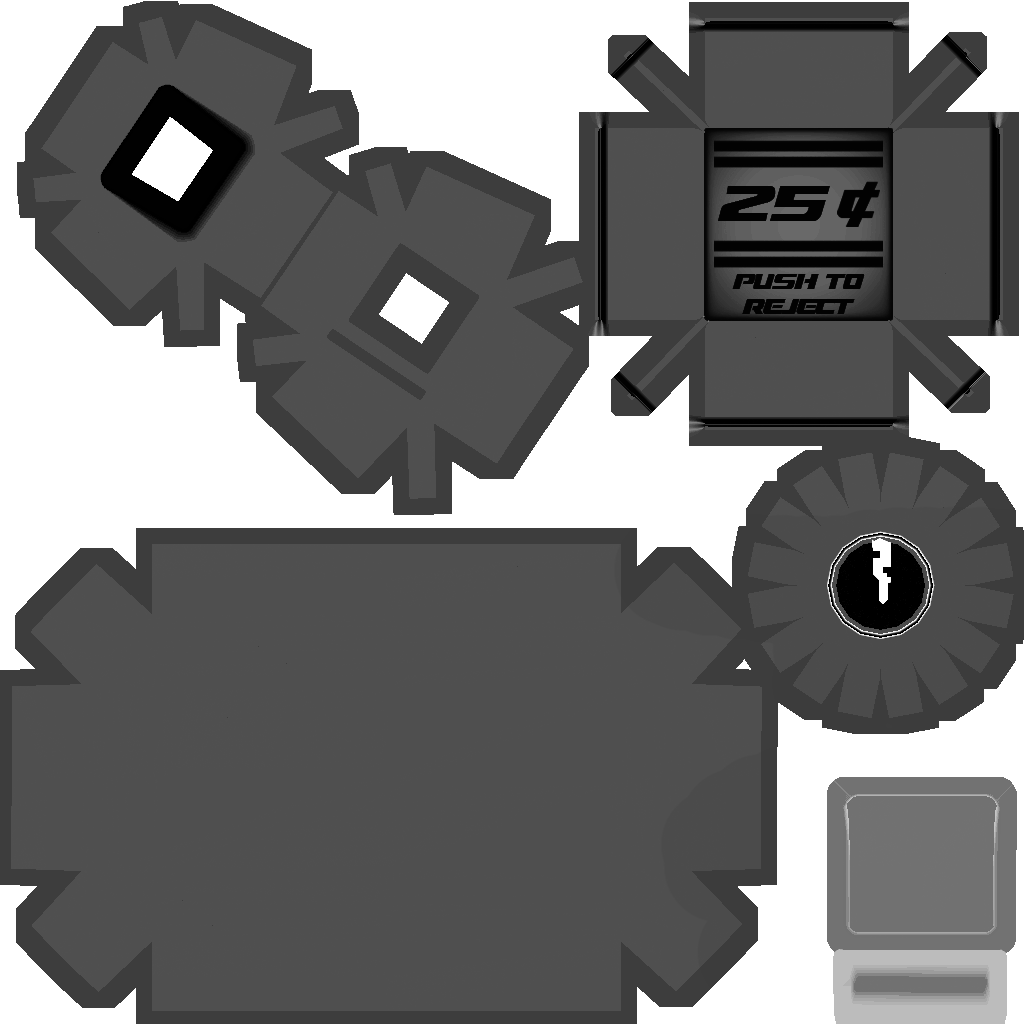
<style>
.page{position:relative;width:1024px;height:1024px;background:#4f4f4f}
.page>*{position:absolute;margin:0}
.t1{font:21.2px "DreamMMA";letter-spacing:-0.02em;color:#020202}
</style>
<div class="page">
<p class="t1" style="left:732px;top:274px;width:133px;height:40px;text-align:center">push to<br>reject</p>
</div>
